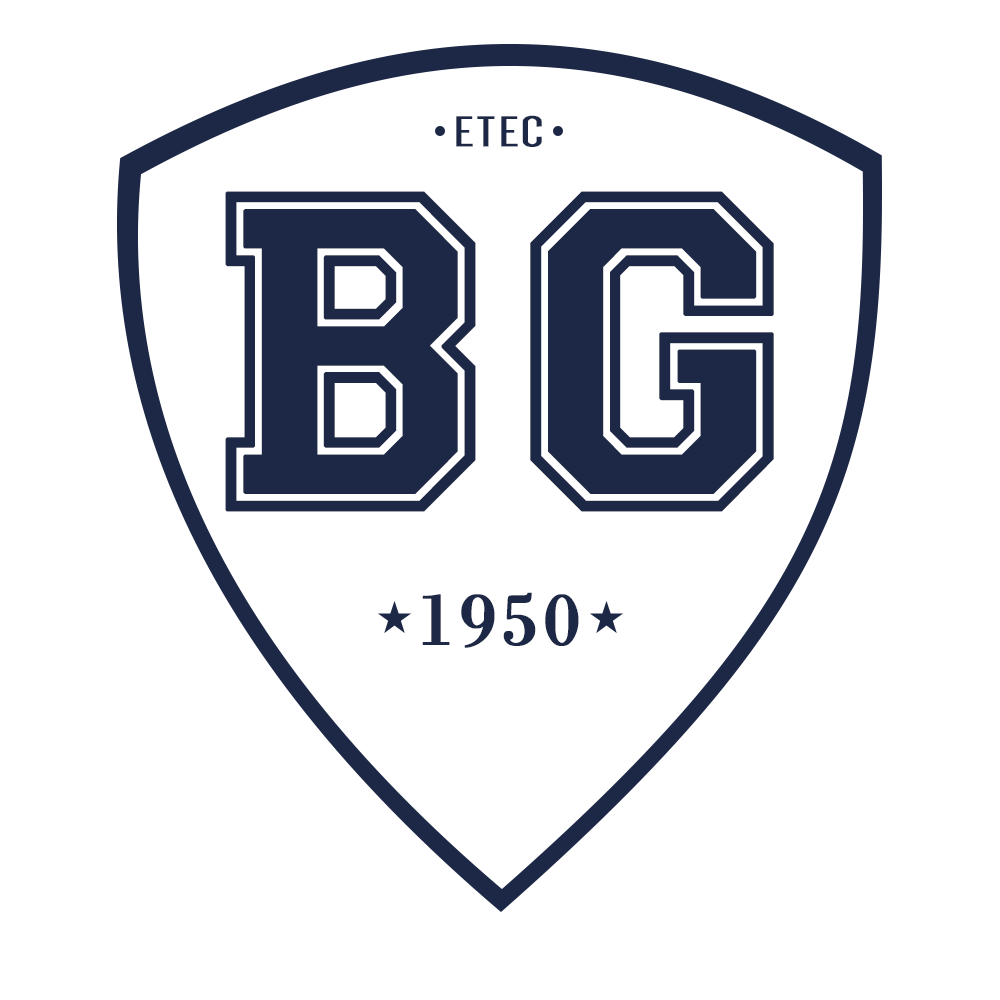
<style>
.page{position:relative;width:1000px;height:1000px;background:#ffffff}
.page>*{position:absolute;margin:0}
.t1{font:44px "Dense-Regular";letter-spacing:0.03em;color:#1d2846;font-weight:bold;scale:1.48 1}
.t2{font:452.9px "Varsity-Regular";letter-spacing:0.03em;color:#1d2846;font-weight:bold}
.t3{font:77.6px "BodoniMT";letter-spacing:0.03em;color:#1d2846;font-weight:bold}
</style>
<div class="page">
<p class="t1" style="left:456px;top:115px;width:86px;height:32px">ETEC</p>
<p class="t2" style="left:225px;top:191px;width:549px;height:321px">BG</p>
<p class="t3" style="left:422px;top:592px;width:157px;height:56px">1950</p>
</div>
